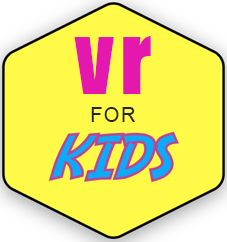
<style>
.page{position:relative;width:227px;height:242px;background:#fff948}
.page>*{position:absolute;margin:0}
.t1{font:88.3px "Impact";letter-spacing:0.075em;color:#e418af}
.t2{font:20px "ArialMT";letter-spacing:0.075em;color:#232323}
</style>
<div class="page">
<p class="t1" style="left:74px;top:36px;width:77px;height:58px">vr</p>
<p class="t2" style="left:91px;top:107px;width:44px;height:15px">FOR</p>
</div>
